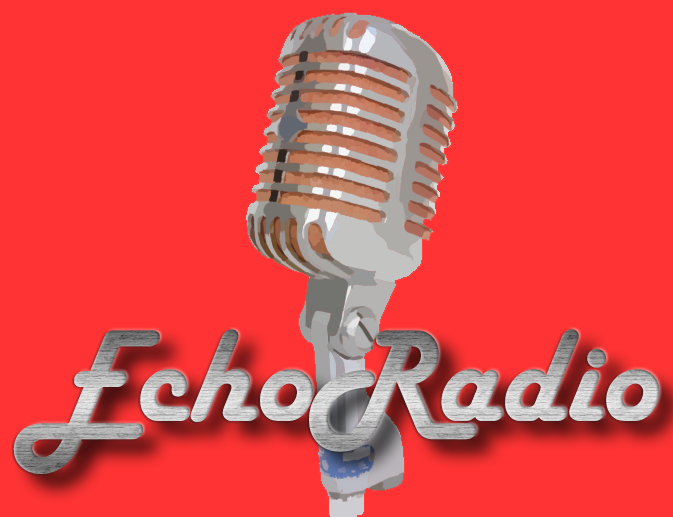
<style>
.page{position:relative;width:673px;height:517px;background:#ff3333}
.page>*{position:absolute;margin:0}
.t1{font:136px "HarlowSolid"}
</style>
<div class="page">
<p class="t1" style="left:13px;top:329px;width:647px;height:145px">EchoRadio</p>
</div>
